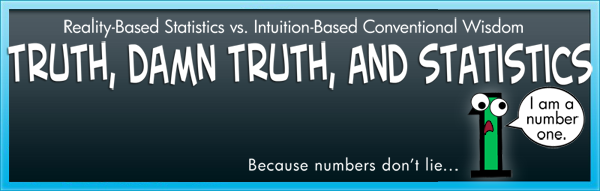
<style>
.page{position:relative;width:600px;height:191px}
.page>*{position:absolute;margin:0}
.t1{font:17.2px "FuturaBk";letter-spacing:-0.01em;color:#ffffff}
.t2{font:62.4px "CreativeBlockBB";letter-spacing:-0.01em;color:#ffffff;scale:0.58 1}
.t3{font:16px/15px "FuturaBk";color:#000000}
.t4{font:15.6px "FuturaBk";letter-spacing:0.05em;color:#ffffff}
</style>
<div class="page">
<p class="t1" style="left:64px;top:17px;width:459px;height:21px">Reality-Based Statistics vs. Intuition-Based Conventional Wisdom</p>
<p class="t2" style="left:8px;top:41px;width:585px;height:49px">truth, damn truth, and statistics</p>
<p class="t3" style="left:527px;top:96px;width:52px;height:44px;text-align:center">I am a <br>number <br>one.</p>
<p class="t4" style="left:249px;top:157px;width:209px;height:14px">Because numbers don’t lie...</p>
</div>
